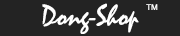
<style>
.page{position:relative;width:180px;height:36px;background:#232323}
.page>*{position:absolute;margin:0}
.t1{font:30px "Mistral";color:#ffffff}
.t2{font:8px "ArialMT";color:#ffffff}
</style>
<div class="page">
<p class="t1" style="left:42px;top:3px;width:97px;height:31px">Dong-Shop</p>
<p class="t2" style="left:146px;top:4px;width:12px;height:6px">TM</p>
</div>
